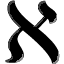
<style>
.page{position:relative;width:64px;height:64px;background:#ffffff}
.page>*{position:absolute;margin:0}
.t1{font:87.9px "Cadman-Bold";letter-spacing:0.003em;color:#000000;scale:1.08 1}
</style>
<div class="page">
<p class="t1" style="left:5px;top:0px;width:55px;height:64px">ℵ</p>
</div>
